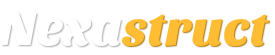
<style>
.page{position:relative;width:275px;height:55px;background:#ffffff}
.page>*{position:absolute;margin:0}
.t1{font:48.4px "SansitaOne";color:#ffbd34;scale:1.04 1}
.t2{font:48.4px "SansitaOne";color:#ffffff;scale:1.04 1}
</style>
<div class="page">
<p class="t1" style="left:1px;top:12px;width:268px;height:34px"><span class="t2">Nexa</span>struct</p>
<p class="t1" style="left:2px;top:13px;width:268px;height:34px"><span class="t2">Nexa</span>struct</p>
</div>
